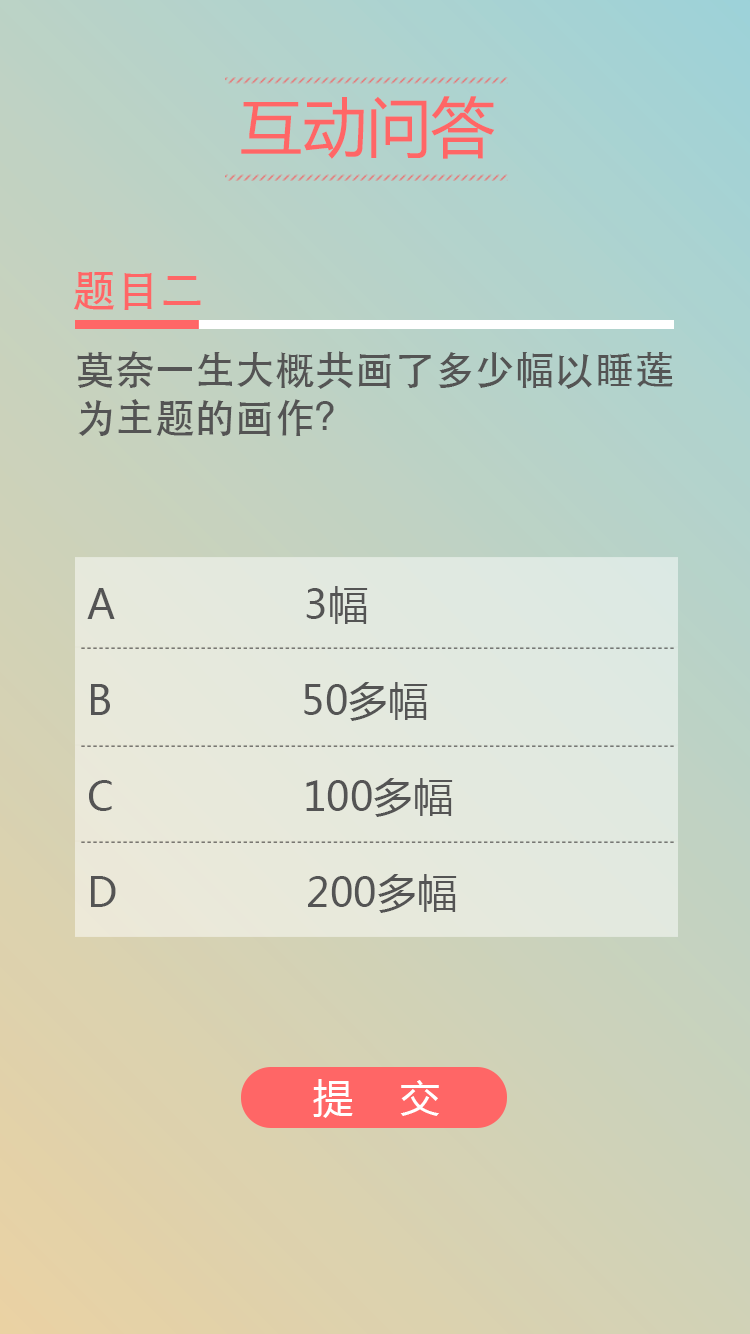
<style>
.page{position:relative;width:750px;height:1334px}
.page>*{position:absolute;margin:0}
.t1{font:64px "MicrosoftYaHei";color:#ff6666}
.t2{font:44px "STHeitiSC-Medium";color:#ff6666}
.t3{font:40px "MicrosoftYaHei";color:#545454}
.t4{font:40px "STHeitiSC-Medium";color:#545454}
.t5{font:40px "MicrosoftYaHei";color:#ffffff}
</style>
<div class="page">
<p class="t1" style="left:241px;top:96px;width:254px;height:63px">互动问答</p>
<p class="t2" style="left:73px;top:272px;width:128px;height:38px">题目二</p>
<p class="t3" style="left:77px;top:351px;width:596px;height:562px"><span class="t4">莫奈一生大概共画了多少幅以睡莲为主题的画作？<br><br><br><br></span> A                3幅<br><br> B                50多幅<br><br> C                100多幅<br><br> D                200多幅</p>
<p class="t5" style="left:313px;top:1079px;width:126px;height:39px">提    交</p>
</div>
